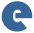
<style>
.page{position:relative;width:34px;height:33px;background:#346699}
.page>*{position:absolute;margin:0}
.t1{font:60px "Bauhaus93";letter-spacing:0.02em;color:#346699}
</style>
<div class="page">
<p class="t1" style="left:1px;top:1px;width:32px;height:31px">e</p>
</div>
